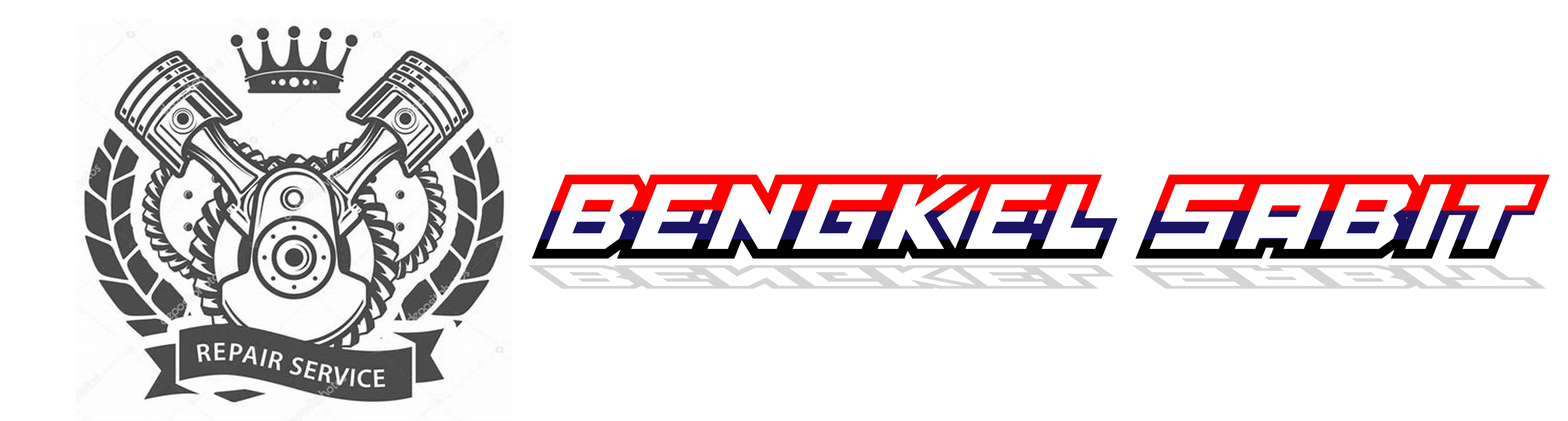
<style>
.page{position:relative;width:1568px;height:421px;background:#ffffff}
.page>*{position:absolute;margin:0}
.t1{font:65.2px "FullPack2025"}
.t2{font:18.3px "FullPack2025";color:#d4d4d4;scale:3.55 1}
</style>
<div class="page">
<p class="t1" style="left:531px;top:174px;width:1019px;height:85px">BENGKEL SABIT</p>
<p class="t2" style="left:528px;top:265px;width:1019px;height:24px">BENGKEL SABIT</p>
</div>
